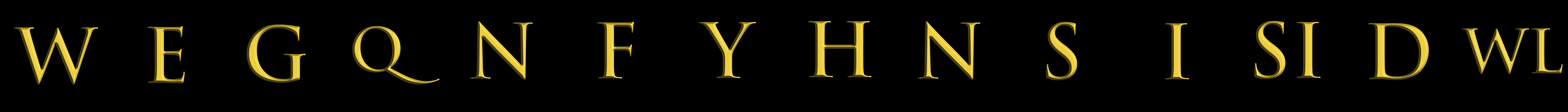
<style>
.page{position:relative;width:1568px;height:112px;background:#000000}
.page>*{position:absolute;margin:0}
.t1{font:74.3px "TrajanPro-Bold"}
.t2{font:59.2px "TrajanPro-Bold"}
.t3{font:59.5px "TrajanPro-Bold"}
</style>
<div class="page">
<p class="t1" style="left:14px;top:27px;width:84px;height:58px">W</p>
<p class="t1" style="left:147px;top:26px;width:38px;height:57px">E</p>
<p class="t1" style="left:247px;top:24px;width:59px;height:59px">G</p>
<p class="t2" style="left:352px;top:26px;width:88px;height:58px">Q</p>
<p class="t1" style="left:470px;top:21px;width:63px;height:59px">N</p>
<p class="t1" style="left:597px;top:22px;width:37px;height:57px">F</p>
<p class="t1" style="left:699px;top:22px;width:57px;height:56px">Y</p>
<p class="t1" style="left:808px;top:21px;width:64px;height:56px">H</p>
<p class="t1" style="left:918px;top:21px;width:62px;height:59px">N</p>
<p class="t1" style="left:1046px;top:22px;width:31px;height:58px">S</p>
<p class="t1" style="left:1165px;top:23px;width:24px;height:57px">I</p>
<p class="t1" style="left:1254px;top:21px;width:67px;height:58px">SI</p>
<p class="t1" style="left:1368px;top:23px;width:61px;height:57px">D</p>
<p class="t3" style="left:1461px;top:28px;width:102px;height:46px">WL</p>
</div>
